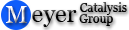
<style>
.page{position:relative;width:129px;height:30px;background:#ffffff}
.page>*{position:absolute;margin:0}
.t1{font:24px "Georgia"}
.t2{font:12px "Georgia"}
.t3{font:24px "Georgia";color:#000000}
</style>
<div class="page">
<p class="t1" style="left:6px;top:6px;width:21px;height:17px">M</p>
<p class="t2" style="left:80px;top:2px;width:47px;height:13px">Catalysis</p>
<p class="t3" style="left:32px;top:10px;width:45px;height:17px">eyer</p>
<p class="t2" style="left:79px;top:14px;width:34px;height:12px">Group</p>
</div>
